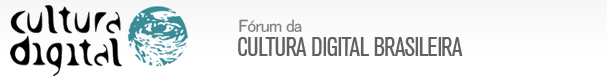
<style>
.page{position:relative;width:607px;height:82px;background:#ffffff}
.page>*{position:absolute;margin:0}
.t1{font:18px "MS-PGothic";letter-spacing:-0.05em;color:#828282}
.t2{font:25.9px "AkzeleratCondensedNormal";letter-spacing:-0.01em;color:#606161;text-transform:uppercase}
</style>
<div class="page">
<p class="t1" style="left:239px;top:19px;width:63px;height:14px">Fórum da</p>
<p class="t2" style="left:238px;top:37px;width:225px;height:19px">Cultura Digital Brasileira</p>
</div>
